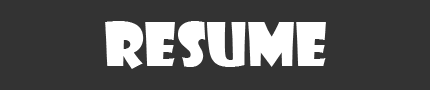
<style>
.page{position:relative;width:430px;height:90px;background:#333333}
.page>*{position:absolute;margin:0}
.t1{font:58.3px "ShowcardGothic-Reg";color:#ffffff}
</style>
<div class="page">
<p class="t1" style="left:105px;top:21px;width:221px;height:48px">resume</p>
</div>
